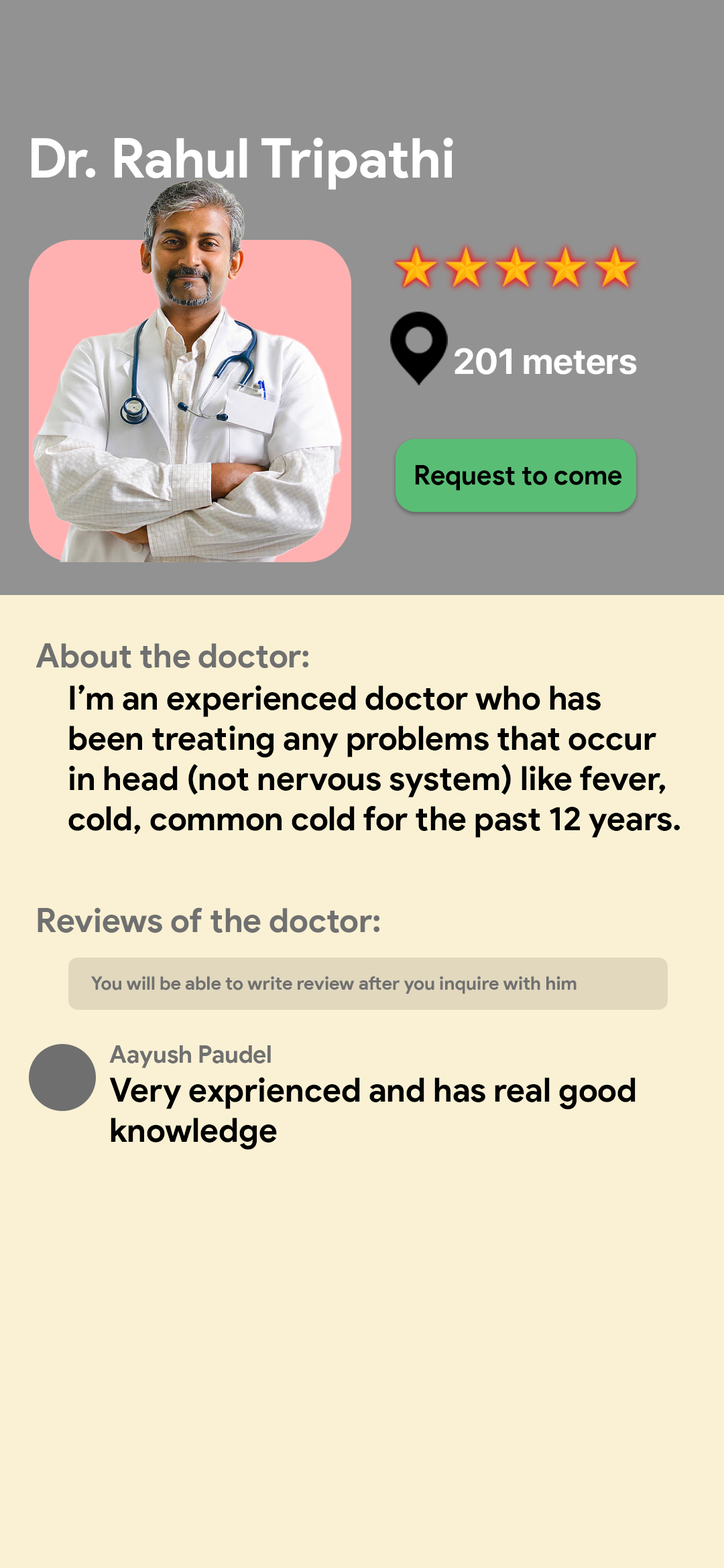
<style>
.page{position:relative;width:724px;height:1568px;background:#faf1d4}
.page>*{position:absolute;margin:0}
.t1{font:55px "ProductSans-Bold";color:#ffffff}
.t2{font:35.9px "SFProDisplay-Bold";color:#ffffff}
.t3{font:27px "ProductSans-Bold";color:#000000}
.t4{font:33.5px "ProductSans-Bold";color:#707070}
.t5{font:33.5px "ProductSans-Bold";color:#000000}
.t6{font:18.7px "ProductSans-Bold";color:#707070}
.t7{font:24.2px "ProductSans-Bold";color:#707070}
</style>
<div class="page">
<p class="t1" style="left:31px;top:137px;width:422px;height:53px">Dr. Rahul Tripathi</p>
<p class="t2" style="left:454px;top:348px;width:183px;height:27px">201 meters</p>
<p class="t3" style="left:415px;top:465px;width:207px;height:26px">Request to come</p>
<p class="t4" style="left:36px;top:643px;width:272px;height:25px">About the doctor:</p>
<p class="t5" style="left:68px;top:685px;width:611px;height:153px">I’m an experienced doctor who has <br>been treating any problems that occur<br>in head (not nervous system) like fever,<br>cold, common cold for the past 12 years.</p>
<p class="t4" style="left:38px;top:907px;width:341px;height:26px">Reviews of the doctor:</p>
<p class="t6" style="left:91px;top:976px;width:485px;height:18px">You will be able to write review after you inquire with him</p>
<p class="t7" style="left:109px;top:1045px;width:162px;height:23px">Aayush Paudel</p>
<p class="t5" style="left:109px;top:1077px;width:526px;height:73px">Very exprienced and has real good <br>knowledge</p>
</div>
